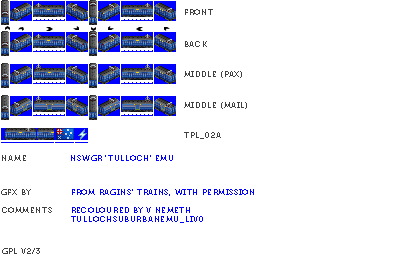
<style>
.page{position:relative;width:400px;height:270px;background:#ffffff}
.page>*{position:absolute;margin:0}
.t1{font:8px "Museo700-Regular";letter-spacing:0.075em;color:#404040;text-transform:uppercase}
.t2{font:8px "Museo700-Regular";letter-spacing:0.075em;color:#0000ff;text-transform:uppercase}
</style>
<div class="page">
<p class="t1" style="left:185px;top:9px;width:28px;height:6px">front</p>
<p class="t1" style="left:185px;top:41px;width:22px;height:6px">back</p>
<p class="t1" style="left:184px;top:71px;width:58px;height:7px">middle (pax)</p>
<p class="t1" style="left:184px;top:102px;width:63px;height:7px">middle (mail)</p>
<p class="t1" style="left:184px;top:132px;width:37px;height:7px">tpl_02a</p>
<p class="t1" style="left:2px;top:155px;width:24px;height:6px">name</p>
<p class="t2" style="left:71px;top:155px;width:102px;height:6px">NSWGR 'Tulloch' EMU</p>
<p class="t1" style="left:1px;top:189px;width:30px;height:6px">gfx by</p>
<p class="t2" style="left:72px;top:189px;width:182px;height:7px">from ragins' trains, with permission</p>
<p class="t1" style="left:2px;top:207px;width:50px;height:6px">comments</p>
<p class="t2" style="left:71px;top:207px;width:132px;height:16px">recoloured by v nemeth<br>TullochSuburbanEMU_Liv0</p>
<p class="t1" style="left:2px;top:248px;width:38px;height:6px">gpl v2/3</p>
</div>
